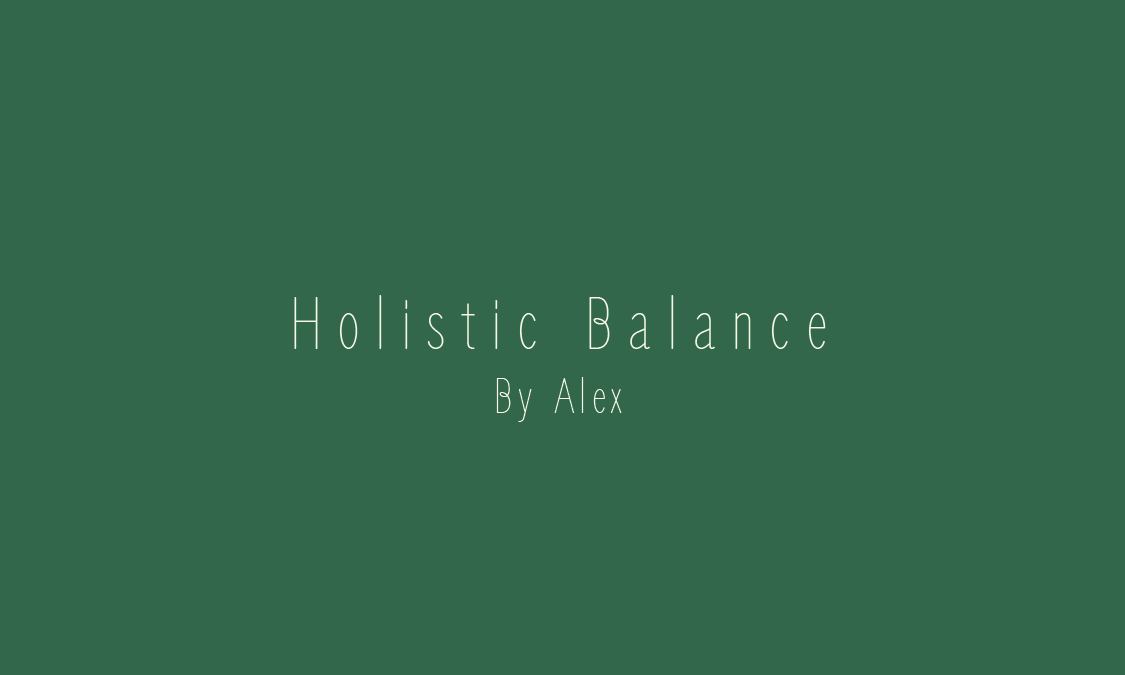
<style>
.page{position:relative;width:1125px;height:675px;background:#32674b}
.page>*{position:absolute;margin:0}
.t1{font:75px "ZenLoop-Regular";letter-spacing:0.2em;color:#faf7e5}
.t2{font:75px "ZenLoop-Regular";letter-spacing:0.1em;color:#faf7e5}
.t3{font:50px "ZenLoop-Regular";letter-spacing:0.1em;color:#faf7e5}
</style>
<div class="page">
<p class="t1" style="left:294px;top:295px;width:532px;height:54px"><span class="t2"><br></span>Holistic Balance</p>
<p class="t3" style="left:496px;top:377px;width:126px;height:45px">By Alex</p>
</div>
